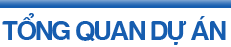
<style>
.page{position:relative;width:231px;height:47px;background:#ffffff}
.page>*{position:absolute;margin:0}
.t1{font:27.7px "FS-Harabara";color:#165daf}
</style>
<div class="page">
<p class="t1" style="left:2px;top:13px;width:224px;height:32px">TỔNG QUAN DỰ ÁN</p>
</div>
